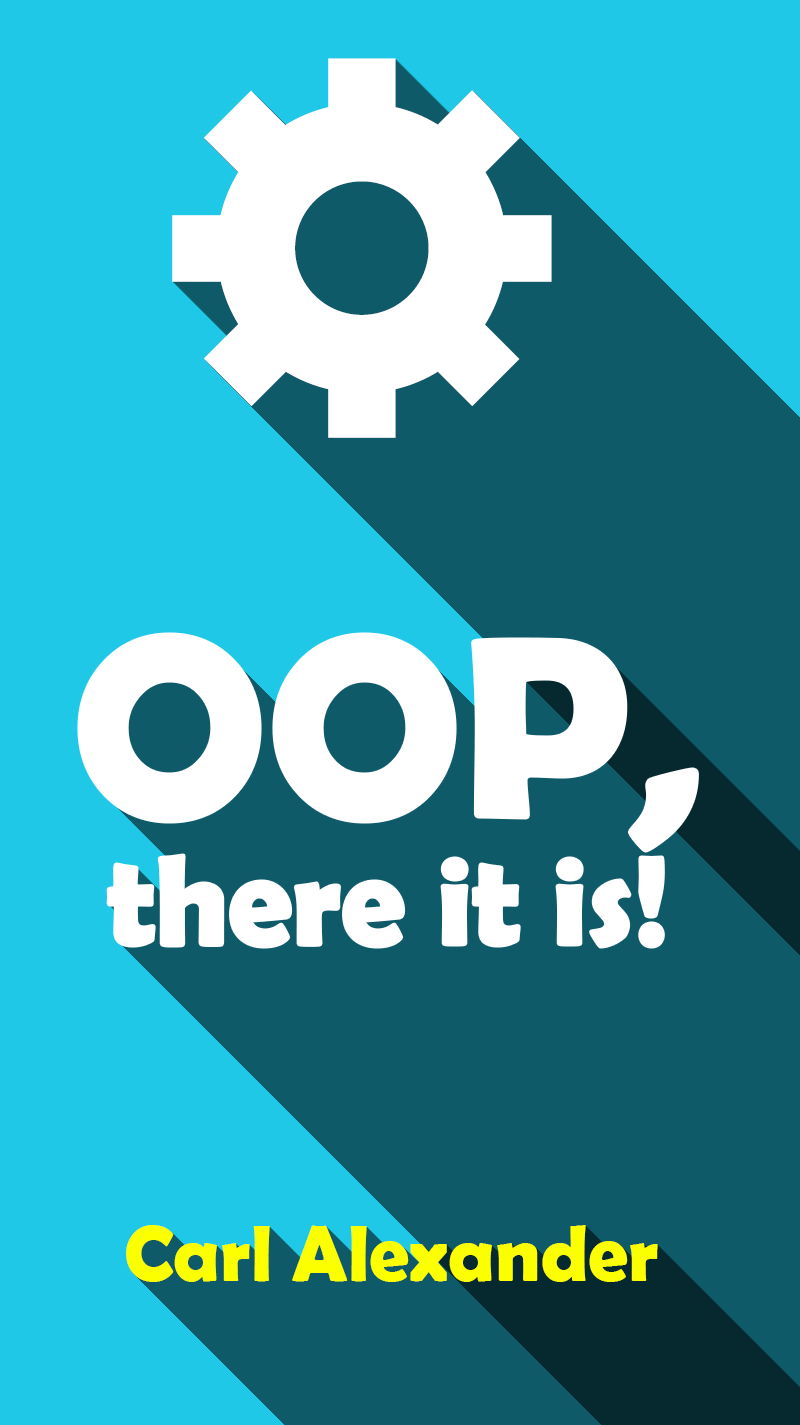
<style>
.page{position:relative;width:800px;height:1425px;background:#0e5a68}
.page>*{position:absolute;margin:0}
.t1{font:128px/128px "BerlinSansFBDemi-Bold";color:#ffffff}
.t2{font:260px/128px "BerlinSansFBDemi-Bold";color:#ffffff}
.t3{font:80px "BerlinSansFBDemi-Bold";color:#fcff00}
</style>
<div class="page">
<p class="t1" style="left:78px;top:634px;width:620px;height:313px;text-align:center"><span class="t2">OOP,<br></span>there it is!</p>
<p class="t3" style="left:126px;top:1225px;width:532px;height:57px">Carl Alexander</p>
</div>
